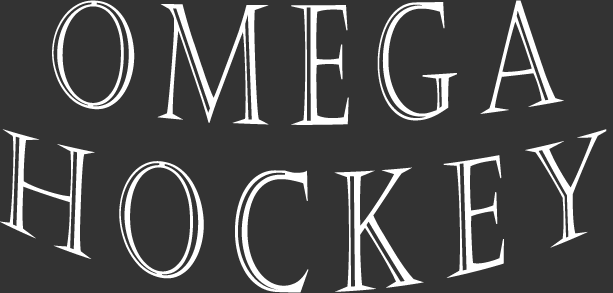
<style>
.page{position:relative;width:613px;height:293px;background:#333333}
.page>*{position:absolute;margin:0}
.t1{font:103.8px/103.8px "Castellar";letter-spacing:0.2em;color:#ffffff;text-transform:uppercase}
</style>
<div class="page">
<p class="t1" style="left:0px;top:0px;width:607px;height:293px;text-align:center">Omega Hockey</p>
</div>
